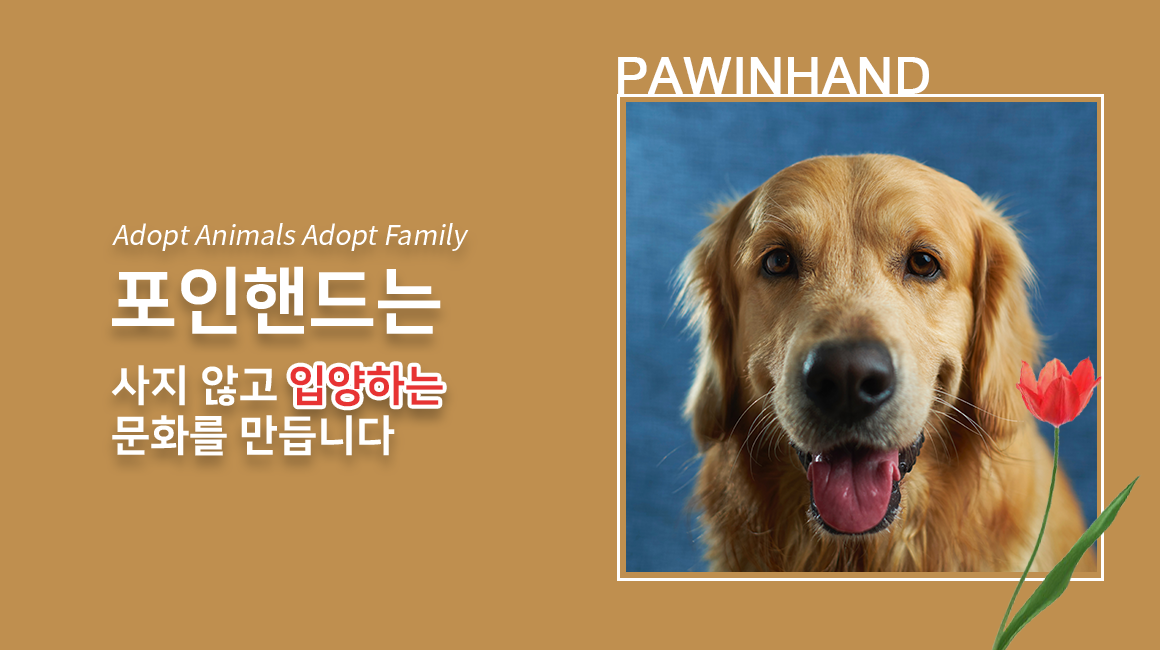
<style>
.page{position:relative;width:1160px;height:650px;background:#bf8f4f}
.page>*{position:absolute;margin:0}
.t1{font:50px "MicrosoftSansSerif";color:#ffffff;font-weight:bold}
.t2{font:27px "NotoSansKR-Regular";color:#ffffff;font-style:italic}
.t3{font:72.9px "NanumSquareEB";color:#ffffff}
.t4{font:42.8px/50.7px "NanumSquareEB";color:#ffffff}
.t5{font:42.8px "NanumSquareEB";color:#e73333}
</style>
<div class="page">
<p class="t1" style="left:618px;top:57px;width:311px;height:37px">PAWINHAND</p>
<p class="t2" style="left:112px;top:223px;width:357px;height:28px">Adopt Animals Adopt Family</p>
<p class="t3" style="left:112px;top:266px;width:329px;height:68px">포인핸드는</p>
<p class="t4" style="left:111px;top:365px;width:284px;height:91px">사지 않고 <br>문화를 만듭니다</p>
<p class="t5" style="left:290px;top:365px;width:153px;height:42px">입양하는</p>
</div>
